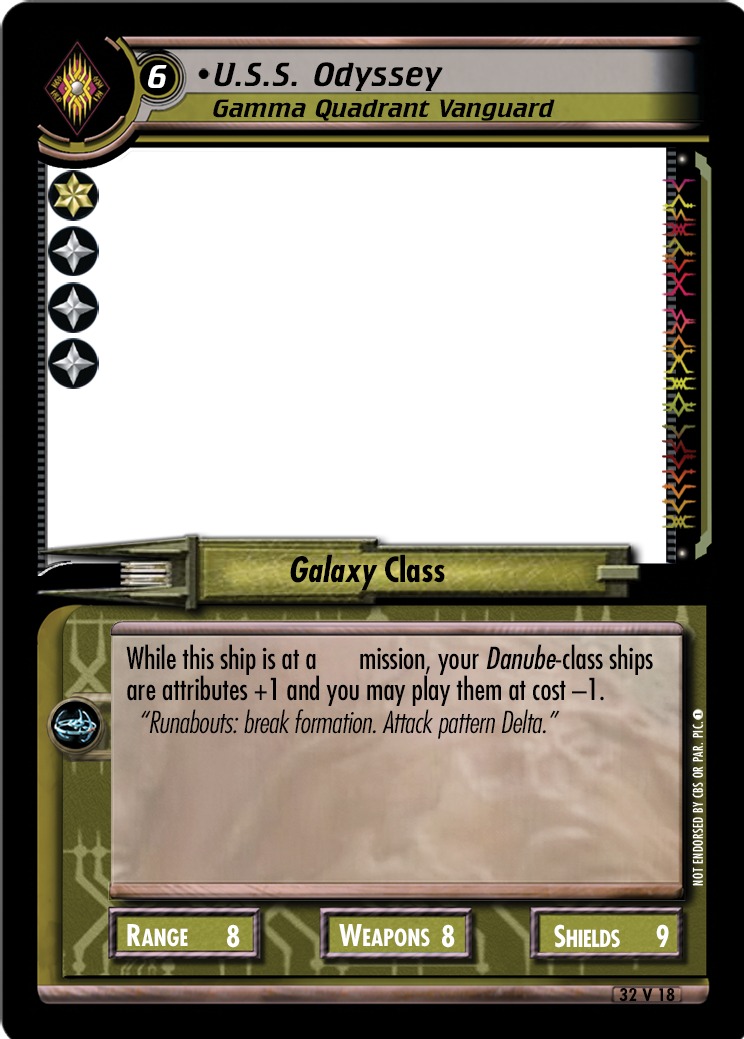
<style>
.page{position:relative;width:744px;height:1039px;background:#ffffff}
.page>*{position:absolute;margin:0}
.t1{font:33.2px "CrilleeBT-Italic";color:#ffffff}
.t2{font:33.7px "CrilleeBT-Italic";letter-spacing:0.03em;color:#000000}
.t3{font:25.3px "CrilleeBT-Italic";letter-spacing:0.003em;color:#000000;scale:1.08 1}
.t4{font:33.7px "FuturaLT-CondensedBoldOblique";letter-spacing:0.003em;color:#000000}
.t5{font:33.7px "FuturaLT-CondensedBold";color:#000000}
.t6{font:29.5px/31.6px "FuturaLT-Condensed";color:#000000}
.t7{font:29.5px/31.6px "FuturaLT-Condensed";color:#000000;font-style:italic}
.t8{font:29.5px "FuturaLT-CondensedLightObl";letter-spacing:-0.015em;color:#000000}
.t9{font:22.8px "FuturaLT-CondensedBold";color:#ffffff;text-transform:uppercase}
.t10{font:29px "FuturaLT-CondensedBold";color:#ffffff;text-transform:uppercase}
.t11{font:22.8px "FuturaLT-CondensedBold";letter-spacing:-0.025em;color:#ffffff;text-transform:uppercase}
.t12{font:29px "FuturaLT-CondensedBold";letter-spacing:-0.025em;color:#ffffff;text-transform:uppercase}
.t13{font:16.8px "FuturaLT-CondensedBold";color:#000000;scale:1.11 1}
</style>
<div class="page">
<p class="t1" style="left:148px;top:65px;width:19px;height:23px">6</p>
<p class="t2" style="left:214px;top:62px;width:229px;height:29px">U.S.S. Odyssey</p>
<p class="t3" style="left:213px;top:99px;width:342px;height:22px">Gamma Quadrant Vanguard</p>
<p class="t4" style="left:290px;top:554px;width:155px;height:37px">Galaxy<span class="t5"> Class</span></p>
<p class="t6" style="left:126px;top:644px;width:527px;height:62px">While this ship is at a       mission, your <span class="t7">Danube</span>-class ships are attributes +1 and you may play them at cost –1.</p>
<p class="t8" style="left:141px;top:709px;width:419px;height:30px">“Runabouts: break formation. Attack pattern Delta.”</p>
<p class="t9" style="left:127px;top:924px;width:61px;height:23px"><span class="t10">R</span>ange</p>
<p class="t10" style="left:227px;top:924px;width:13px;height:24px">8</p>
<p class="t9" style="left:339px;top:924px;width:91px;height:23px"><span class="t10">W</span>eapons</p>
<p class="t10" style="left:442px;top:924px;width:13px;height:24px">8</p>
<p class="t11" style="left:554px;top:924px;width:66px;height:24px"><span class="t12">S</span>hields</p>
<p class="t10" style="left:656px;top:924px;width:13px;height:23px">9</p>
<p class="t13" style="left:619px;top:988px;width:56px;height:14px">32 V 18</p>
</div>
